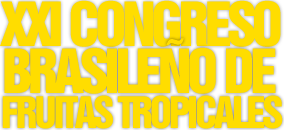
<style>
.page{position:relative;width:284px;height:130px;background:#ffdd00}
.page>*{position:absolute;margin:0}
.t1{font:55.5px "Swiss921BT-RegularA";letter-spacing:0.1em;color:#ffdd00;text-transform:uppercase}
.t2{font:39.5px "Swiss921BT-RegularA";letter-spacing:0.1em;color:#ffdd00;text-transform:uppercase}
</style>
<div class="page">
<p class="t1" style="left:0px;top:0px;width:281px;height:47px">XXIcongreso</p>
<p class="t1" style="left:4px;top:38px;width:272px;height:56px">Brasileñode</p>
<p class="t2" style="left:2px;top:95px;width:281px;height:34px">FRuitastropicales</p>
</div>
